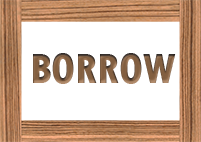
<style>
.page{position:relative;width:201px;height:142px;background:#ffffff}
.page>*{position:absolute;margin:0}
.t1{font:44.3px "TwCenMT-CondensedExtraBold";color:#836042;scale:0.97 1}
</style>
<div class="page">
<p class="t1" style="left:33px;top:53px;width:143px;height:31px">BORROW</p>
</div>
